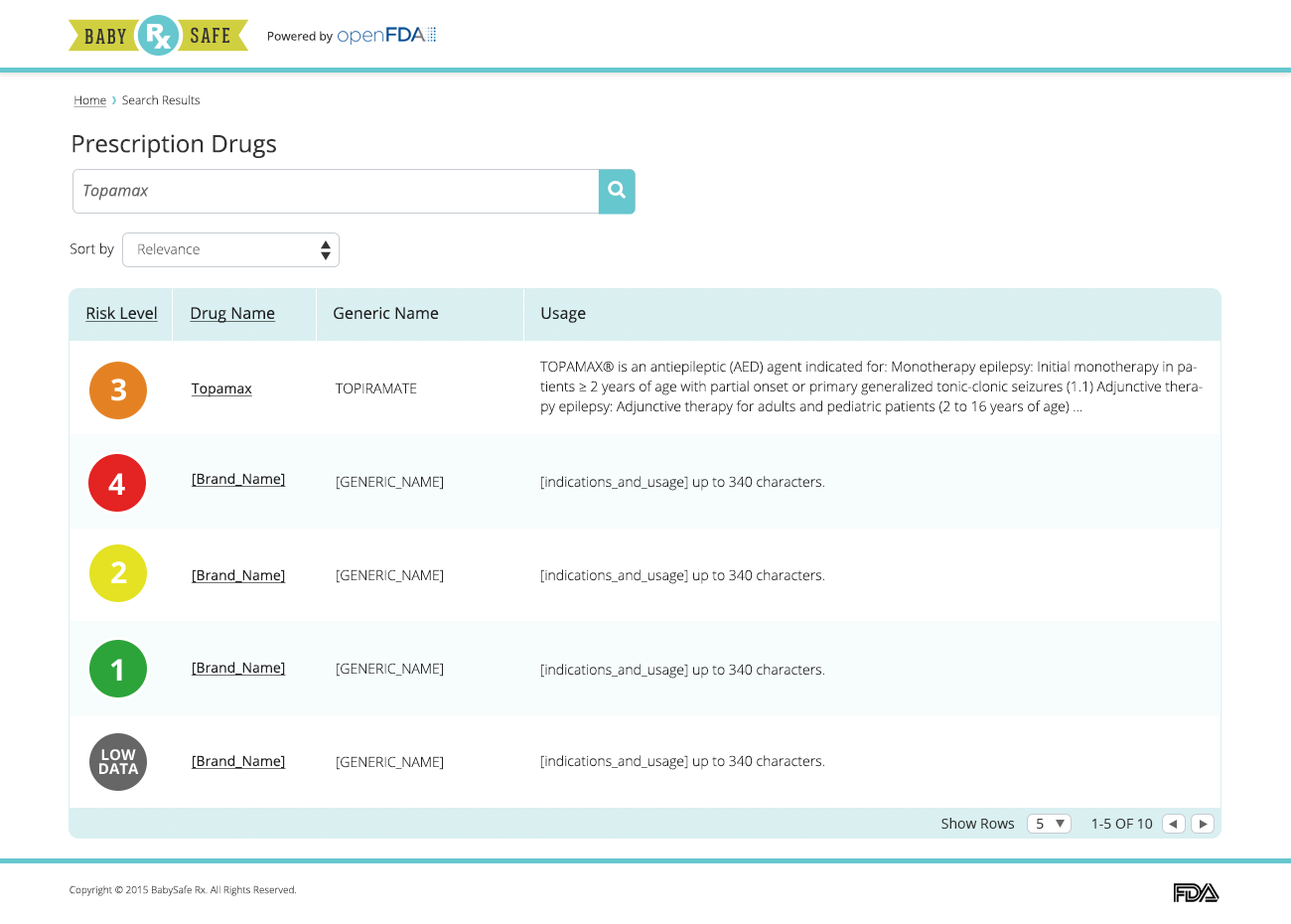
<style>
.page{position:relative;width:1291px;height:924px;background:#ffffff}
.page>*{position:absolute;margin:0}
.t1{font:11.9px "OpenSans";color:#333333}
.t2{font:11.9px "OpenSans-Light";color:#333333}
.t3{font:11.9px "OpenSans-Light";color:#333333;text-decoration:underline}
.t4{font:23.8px "OpenSans";color:#333333}
.t5{font:15.9px "OpenSans-Italic";color:#666666}
.t6{font:13.9px "OpenSans-Light";color:#222222}
.t7{font:13.9px "OpenSans-Light";color:#666666}
.t8{font:15.9px "OpenSans";color:#222222;text-decoration:underline}
.t9{font:15.9px "OpenSans";color:#222222}
.t10{font:13.9px/19.9px "OpenSans-Light";color:#222222}
.t11{font:13.9px "OpenSans";color:#222222;text-decoration:underline}
.t12{font:13.9px/93.4px "OpenSans-Light";color:#222222;text-transform:uppercase}
.t13{font:13.9px/93.4px "OpenSans-Light";color:#222222}
.t14{font:13.9px "OpenSans";color:#333333}
.t15{font:13.9px "OpenSans";color:#333333;text-transform:uppercase}
.t16{font:9.9px "OpenSans-Light";color:#333333}
</style>
<div class="page">
<p class="t1" style="left:268px;top:31px;width:65px;height:13px">Powered by</p>
<p class="t2" style="left:73px;top:94px;width:128px;height:13px"><span class="t3">Home</span>     Search Results</p>
<p class="t4" style="left:72px;top:134px;width:204px;height:24px">Prescription Drugs</p>
<p class="t5" style="left:83px;top:184px;width:66px;height:17px">Topamax</p>
<p class="t6" style="left:71px;top:242px;width:43px;height:15px">Sort by</p>
<p class="t7" style="left:138px;top:243px;width:62px;height:11px">Relevance</p>
<p class="t8" style="left:85px;top:306px;width:73px;height:16px">Risk Level</p>
<p class="t8" style="left:190px;top:307px;width:86px;height:16px">Drug Name</p>
<p class="t9" style="left:334px;top:307px;width:105px;height:12px">Generic Name</p>
<p class="t9" style="left:541px;top:307px;width:45px;height:16px">Usage</p>
<p class="t10" style="left:540px;top:361px;width:663px;height:54px">TOPAMAX® is an antiepileptic (AED) agent indicated for: Monotherapy epilepsy: Initial monotherapy in patients ≥ 2 years of age with partial onset or primary generalized tonic-clonic seizures (1.1) Adjunctive therapy epilepsy: Adjunctive therapy for adults and pediatric patients (2 to 16 years of age) ...</p>
<p class="t11" style="left:191px;top:382px;width:61px;height:15px">Topamax</p>
<p class="t12" style="left:335px;top:382px;width:108px;height:388px">TOPIRAMATE<br><span class="t13">[</span>generic_name<span class="t13">]<br></span>[generic_name]<br>[generic_name]<br>[generic_name]</p>
<p class="t11" style="left:191px;top:473px;width:95px;height:14px">[Brand_Name]</p>
<p class="t6" style="left:541px;top:476px;width:283px;height:15px">[indications_and_usage] up to 340 characters.</p>
<p class="t11" style="left:191px;top:569px;width:95px;height:14px">[Brand_Name]</p>
<p class="t6" style="left:541px;top:569px;width:283px;height:15px">[indications_and_usage] up to 340 characters.</p>
<p class="t11" style="left:191px;top:661px;width:95px;height:14px">[Brand_Name]</p>
<p class="t6" style="left:541px;top:663px;width:283px;height:15px">[indications_and_usage] up to 340 characters.</p>
<p class="t11" style="left:191px;top:755px;width:95px;height:14px">[Brand_Name]</p>
<p class="t6" style="left:541px;top:755px;width:283px;height:15px">[indications_and_usage] up to 340 characters.</p>
<p class="t14" style="left:941px;top:817px;width:74px;height:11px">Show Rows</p>
<p class="t14" style="left:1037px;top:818px;width:7px;height:10px">5</p>
<p class="t15" style="left:1092px;top:818px;width:61px;height:10px">1-5 of 10</p>
<p class="t16" style="left:70px;top:885px;width:226px;height:11px">Copyright © 2015 BabySafe Rx. All Rights Reserved.</p>
</div>
